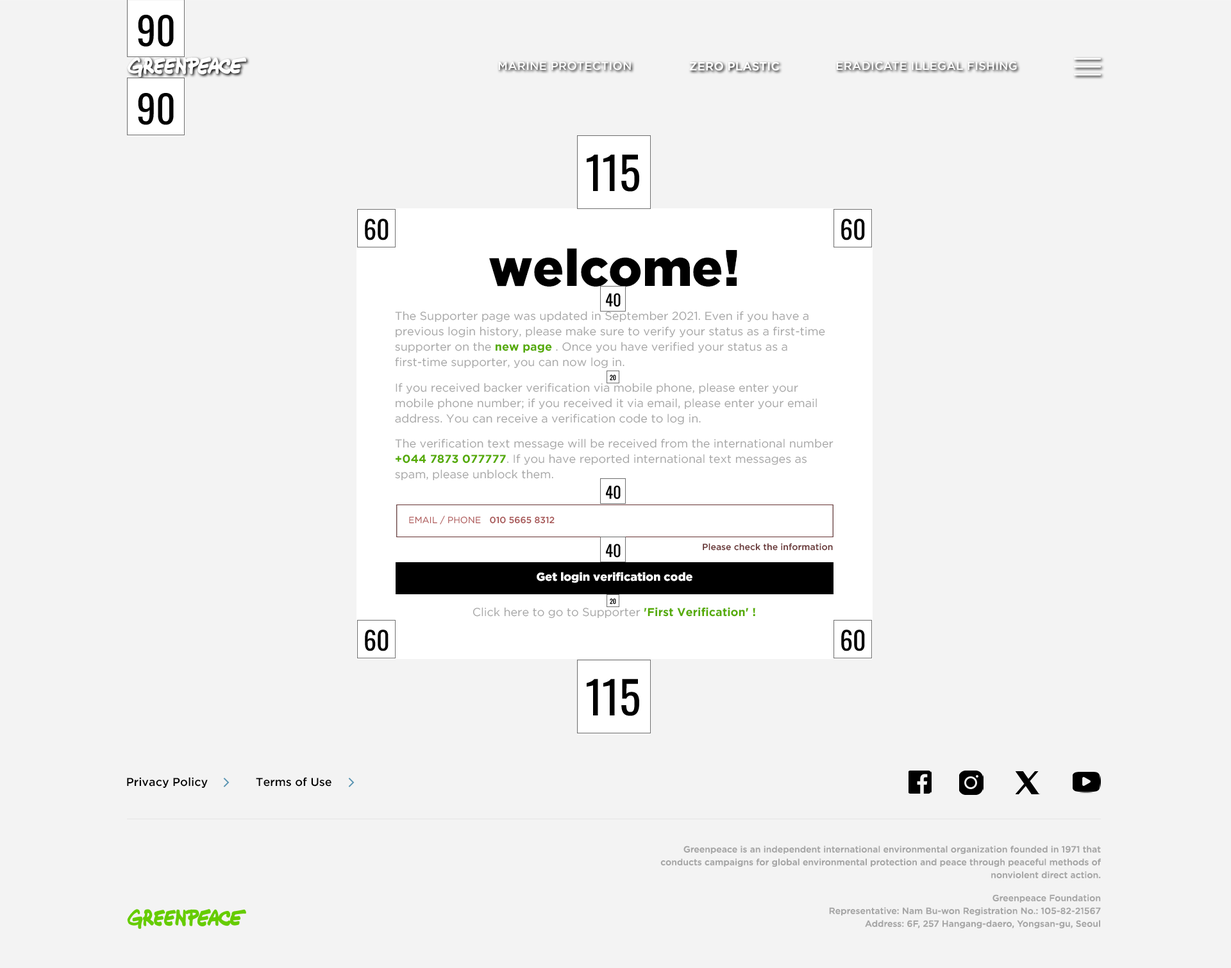
<style>
.page{position:relative;width:1231px;height:968px;background:#f3f3f3}
.page>*{position:absolute;margin:0}
.t1{font:11.5px "GothamPro-Medium";color:#ffffff;text-transform:uppercase}
.t2{font:51.3px "GothamPro-Black";color:#000000}
.t3{font:11.5px/15.4px "GothamPro";color:#a6a6a6}
.t4{font:11.5px/15.4px "GothamPro-Bold";color:#55ab00}
.t5{font:9px "GothamPro";color:#af5555}
.t6{font:9px "GothamPro-Medium";color:#a65151}
.t7{font:9px "GothamPro-Medium";color:#663232}
.t8{font:11.5px "GothamPro-Black";color:#ffffff}
.t9{font:11.5px "GothamPro";color:#a6a6a6}
.t10{font:11.5px "GothamPro-Bold";color:#55ab00}
.t11{font:11.5px "GothamPro-Medium";color:#000000}
.t12{font:9px/12.8px "GothamPro-Medium";color:#a6a6a6}
</style>
<div class="page">
<p class="t1" style="left:498px;top:62px;width:133px;height:9px">Marine protection</p>
<p class="t1" style="left:689px;top:62px;width:91px;height:9px">Zero plastic</p>
<p class="t1" style="left:836px;top:62px;width:181px;height:9px">Eradicate illegal fishing</p>
<p class="t2" style="left:489px;top:248px;width:249px;height:39px">welcome!</p>
<p class="t3" style="left:395px;top:311px;width:430px;height:58px">The Supporter page was updated in September 2021. Even if you have a previous login history, please make sure to verify your status as a first-time supporter on the <span class="t4">new page</span> . Once you have verified your status as a first-time supporter, you can now log in.</p>
<p class="t3" style="left:395px;top:383px;width:422px;height:42px">If you received backer verification via mobile phone, please enter your mobile phone number; if you received it via email, please enter your email address. You can receive a verification code to log in.</p>
<p class="t3" style="left:395px;top:439px;width:439px;height:42px">The verification text message will be received from the international number <span class="t4">+044 7873 077777</span>. If you have reported international text messages as spam, please unblock them.</p>
<p class="t5" style="left:409px;top:516px;width:72px;height:9px">EMAIL / PHONE</p>
<p class="t5" style="left:409px;top:516px;width:72px;height:9px">EMAIL / PHONE</p>
<p class="t5" style="left:409px;top:516px;width:72px;height:9px">EMAIL / PHONE</p>
<p class="t6" style="left:490px;top:516px;width:65px;height:8px">010 5665 8312</p>
<p class="t6" style="left:490px;top:516px;width:65px;height:8px">010 5665 8312</p>
<p class="t7" style="left:703px;top:543px;width:130px;height:8px">Please check the information</p>
<p class="t8" style="left:537px;top:572px;width:156px;height:11px">Get login verification code</p>
<p class="t9" style="left:473px;top:607px;width:282px;height:12px">Click here to go to Supporter <span class="t10">'First Verification' !</span></p>
<p class="t11" style="left:127px;top:777px;width:81px;height:11px">Privacy Policy</p>
<p class="t11" style="left:256px;top:777px;width:76px;height:10px">Terms of Use</p>
<p class="t12" style="left:661px;top:846px;width:440px;height:33px;text-align:right">Greenpeace is an independent international environmental organization founded in 1971 that conducts campaigns for global environmental protection and peace through peaceful methods of nonviolent direct action.</p>
<p class="t12" style="left:829px;top:895px;width:272px;height:34px;text-align:right">Greenpeace Foundation<br>Representative: Nam Bu-won Registration No.: 105-82-21567<br>Address: 6F, 257 Hangang-daero, Yongsan-gu, Seoul</p>
</div>
